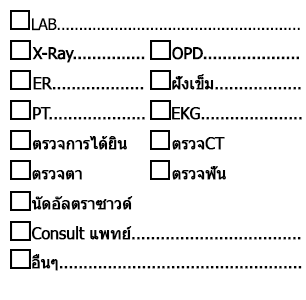
<style>
.page{position:relative;width:306px;height:300px;background:#ffffff}
.page>*{position:absolute;margin:0}
.t1{font:16px "Tahoma";letter-spacing:-0.025em;color:#000000}
.t2{font:16px "Tahoma";letter-spacing:-0.025em;color:#000000;font-weight:bold}
</style>
<div class="page">
<p class="t1" style="left:32px;top:18px;width:268px;height:13px">LAB.......................................................</p>
<p class="t2" style="left:32px;top:47px;width:113px;height:16px">X-Ray...............</p>
<p class="t2" style="left:172px;top:46px;width:127px;height:14px">OPD....................</p>
<p class="t2" style="left:33px;top:77px;width:111px;height:13px">ER...................</p>
<p class="t2" style="left:172px;top:74px;width:129px;height:16px">ฝังเข็ม..................</p>
<p class="t2" style="left:33px;top:107px;width:112px;height:13px">PT....................</p>
<p class="t2" style="left:172px;top:107px;width:130px;height:13px">EKG.....................</p>
<p class="t2" style="left:32px;top:136px;width:95px;height:14px">ตรวจการได้ยิน</p>
<p class="t2" style="left:172px;top:137px;width:53px;height:13px">ตรวจCT</p>
<p class="t2" style="left:32px;top:170px;width:50px;height:10px">ตรวจตา</p>
<p class="t2" style="left:172px;top:166px;width:54px;height:14px">ตรวจฟัน</p>
<p class="t2" style="left:31px;top:196px;width:102px;height:14px">นัดอัลตราซาวด์</p>
<p class="t2" style="left:31px;top:226px;width:270px;height:14px">Consult แพทย์...................................</p>
<p class="t2" style="left:32px;top:254px;width:270px;height:17px">อื่นๆ..................................................</p>
</div>
